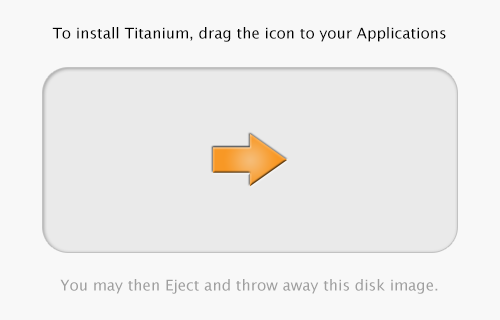
<style>
.page{position:relative;width:500px;height:320px;background:#f8f8f8}
.page>*{position:absolute;margin:0}
.t1{font:15px "LucidaGrande";color:#000000}
.t2{font:15px "LucidaGrande";color:#9f9f9f}
</style>
<div class="page">
<p class="t1" style="left:52px;top:27px;width:394px;height:15px">To install Titanium, drag the icon to your Applications folder.</p>
<p class="t2" style="left:60px;top:279px;width:378px;height:15px">You may then Eject and throw away this disk image.</p>
</div>
